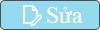
<style>
.page{position:relative;width:100px;height:30px;background:#94dbf0}
.page>*{position:absolute;margin:0}
.t1{font:24px "TimesNewRomanPSMT";color:#ffffff}
</style>
<div class="page">
<p class="t1" style="left:47px;top:7px;width:36px;height:16px">Sửa</p>
</div>
